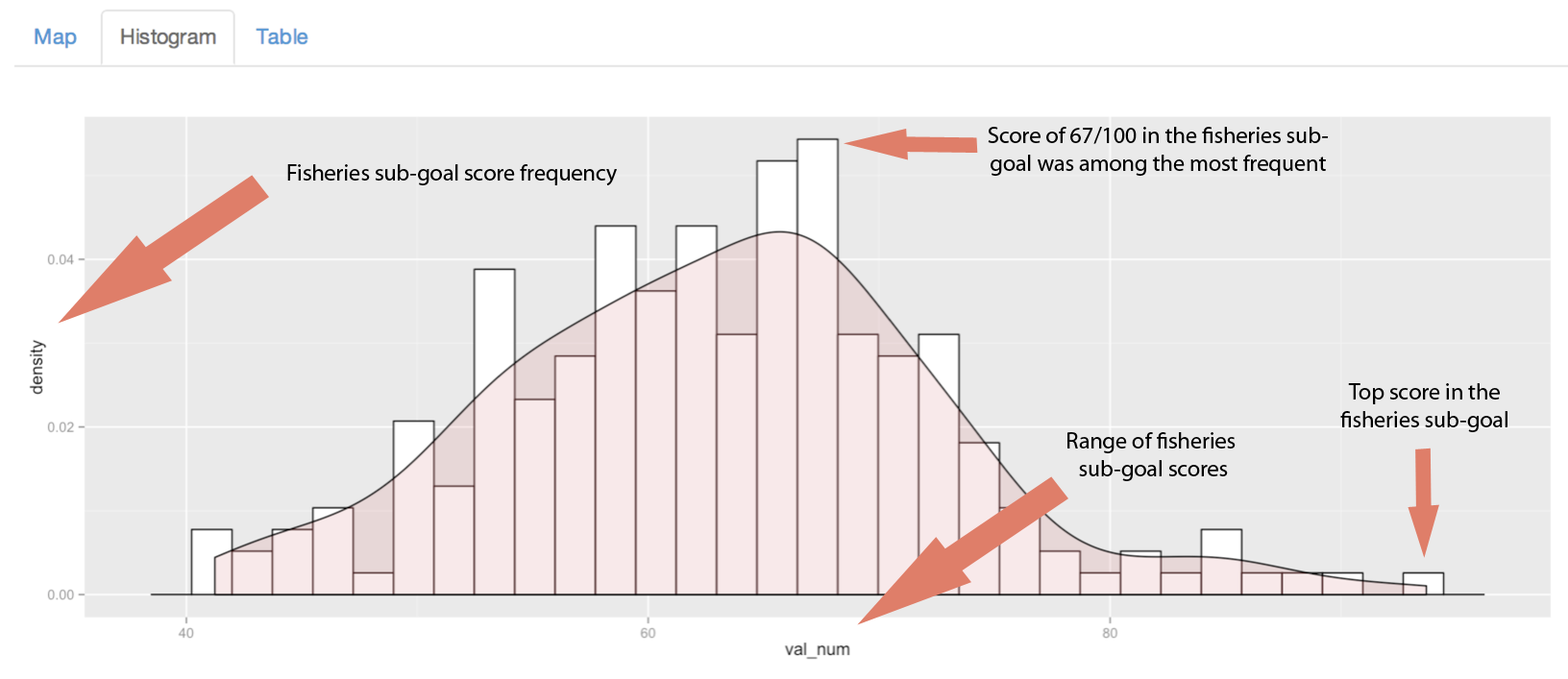
<style>
.page{position:relative;width:1568px;height:679px;background:#eaeaea}
.page>*{position:absolute;margin:0}
.t1{font:23.1px "MyriadPro-Regular";color:#000000}
</style>
<div class="page">
<p class="t1" style="left:988px;top:127px;width:341px;height:49px;text-align:center">Score of 67/100 in the fisheries sub-<br>goal was among the most frequent</p>
<p class="t1" style="left:287px;top:164px;width:330px;height:21px">Fisheries sub-goal score frequency</p>
<p class="t1" style="left:1340px;top:383px;width:167px;height:49px;text-align:center">Top score in the <br>fisheries sub-goal</p>
<p class="t1" style="left:1067px;top:432px;width:169px;height:49px;text-align:center">Range of fisheries <br>sub-goal scores</p>
</div>
